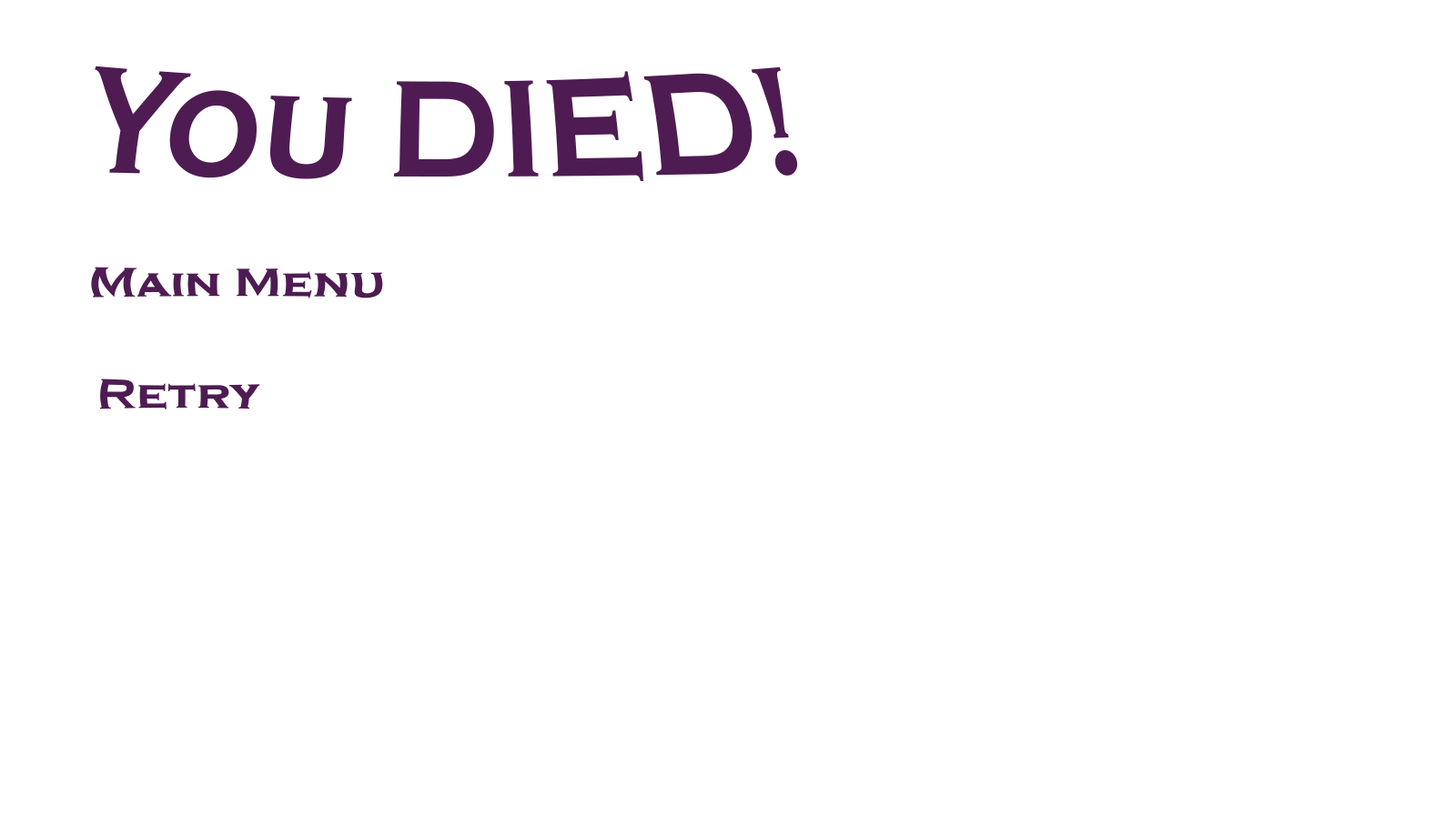
<style>
.page{position:relative;width:1456px;height:819px;background:#ffffff}
.page>*{position:absolute;margin:0}
.t1{font:38.4px "CopperplateGothic-Bold";color:#4e1c53;scale:0.78 1}
.t2{font:10.9px "CopperplateGothic-Bold";color:#4e1c53}
</style>
<div class="page">
<p class="t1" style="left:95px;top:66px;width:703px;height:115px">You DIED!</p>
<p class="t2" style="left:91px;top:267px;width:292px;height:31px">Main Menu</p>
<p class="t2" style="left:99px;top:379px;width:161px;height:30px">Retry</p>
</div>
